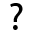
<style>
.page{position:relative;width:32px;height:32px;background:#ffffff}
.page>*{position:absolute;margin:0}
.t1{font:40px "MyriadPro-Regular";color:#000000}
</style>
<div class="page">
<p class="t1" style="left:10px;top:3px;width:13px;height:27px">?</p>
</div>
